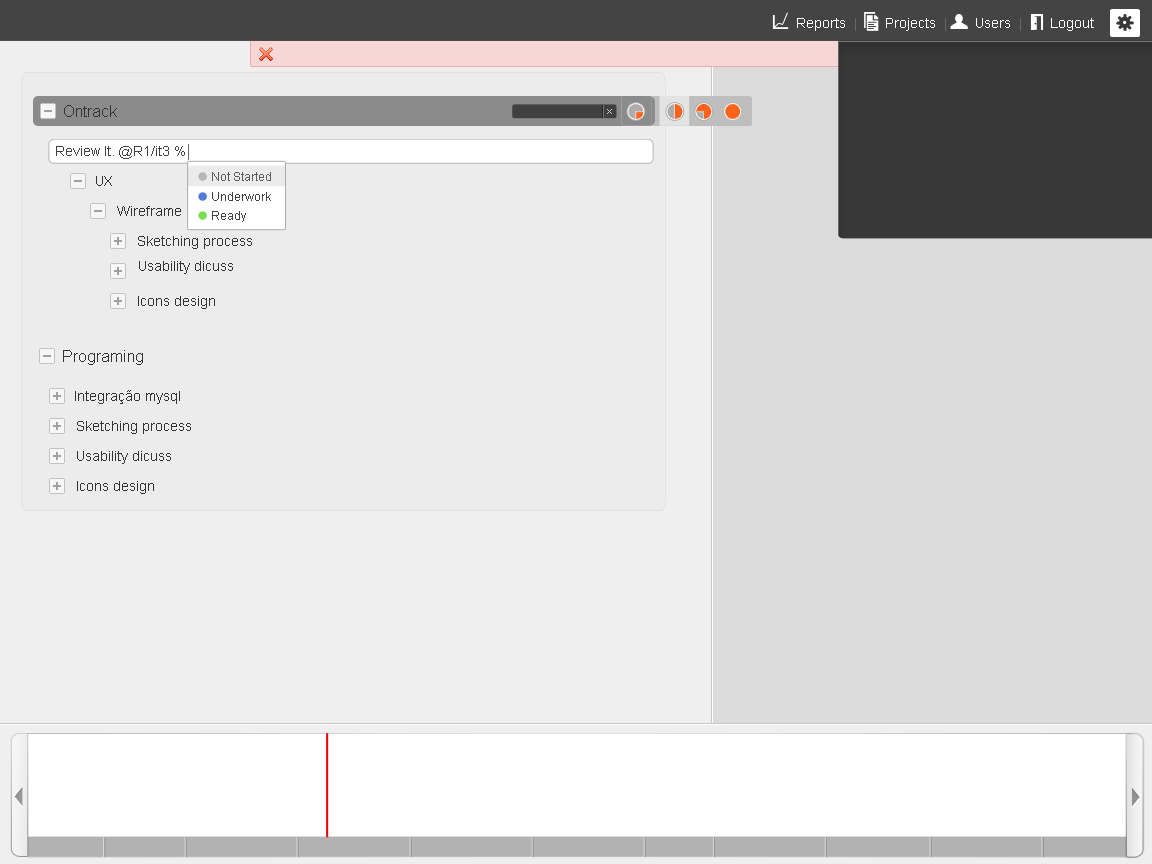
<style>
.page{position:relative;width:1152px;height:864px;background:#ececec}
.page>*{position:absolute;margin:0}
.t1{font:14px "ArialMT";color:#ffffff}
.t2{font:14px "ArialMT";color:#676666}
.t3{font:16px "ArialMT";color:#333333}
.t4{font:14px "ArialMT";color:#404040}
.t5{font:17px "ArialMT";color:#6d6d6d}
.t6{font:12px "ArialMT";color:#5c5c5c}
.t7{font:14px "ArialMT";color:#333333}
.t8{font:12px "ArialMT";color:#404040}
</style>
<div class="page">
<p class="t1" style="left:797px;top:18px;width:297px;height:13px">Reports  <span class="t2">|       </span>Projects  <span class="t2">|     </span>  Users  <span class="t2">|     </span>  Logout</p>
<p class="t3" style="left:64px;top:105px;width:53px;height:12px">Ontrack</p>
<p class="t3" style="left:64px;top:105px;width:53px;height:12px">Ontrack</p>
<p class="t4" style="left:56px;top:144px;width:133px;height:16px">Review It. @R1/it3 %<span class="t5">|</span></p>
<p class="t6" style="left:212px;top:172px;width:59px;height:9px">Not Started</p>
<p class="t7" style="left:96px;top:176px;width:16px;height:10px">UX</p>
<p class="t8" style="left:212px;top:192px;width:59px;height:9px">Underwork</p>
<p class="t7" style="left:117px;top:206px;width:64px;height:10px">Wireframe</p>
<p class="t8" style="left:212px;top:211px;width:34px;height:11px">Ready</p>
<p class="t7" style="left:138px;top:236px;width:114px;height:13px">Sketching process</p>
<p class="t7" style="left:139px;top:261px;width:94px;height:13px">Usability dicuss</p>
<p class="t7" style="left:138px;top:296px;width:77px;height:13px">Icons design</p>
<p class="t3" style="left:63px;top:350px;width:80px;height:15px">Programing</p>
<p class="t7" style="left:75px;top:390px;width:105px;height:14px">Integração mysql</p>
<p class="t7" style="left:77px;top:421px;width:114px;height:13px">Sketching process</p>
<p class="t7" style="left:77px;top:451px;width:94px;height:13px">Usability dicuss</p>
<p class="t7" style="left:77px;top:481px;width:77px;height:13px">Icons design</p>
</div>
